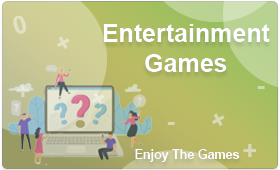
<style>
.page{position:relative;width:280px;height:170px}
.page>*{position:absolute;margin:0}
.t1{font:25px "Arial-BoldMT";color:#e3e1c6}
.t2{font:25px "Arial-BoldMT";color:#ffffff}
.t3{font:25px "Arial-BoldMT";color:#e4e3c6}
.t4{font:25px "Arial-BoldMT";color:#e1e2d2}
.t5{font:25px "Arial-BoldMT";color:#ccdab2}
.t6{font:25px "Arial-BoldMT";color:#edecdb}
.t7{font:25px "Arial-BoldMT";color:#d7dab3}
.t8{font:25px "Arial-BoldMT";color:#d8d7b4}
.t9{font:12.5px "Arial-BoldMT";color:#ffffff}
.t10{font:25px "Arial-BoldMT";color:#d8d9b4}
</style>
<div class="page">
<p class="t1" style="left:13px;top:15px;width:13px;height:19px;rotate:-16deg">0</p>
<p class="t2" style="left:103px;top:24px;width:167px;height:48px;text-align:center">Entertainment<br>Games</p>
<p class="t3" style="left:57px;top:36px;width:13px;height:13px;rotate:-29deg">+</p>
<p class="t4" style="left:16px;top:84px;width:13px;height:13px">+</p>
<p class="t5" style="left:257px;top:86px;width:8px;height:3px">-</p>
<p class="t6" style="left:92px;top:92px;width:13px;height:13px;rotate:-29deg">+</p>
<p class="t7" style="left:212px;top:113px;width:13px;height:13px;rotate:-29deg">+</p>
<p class="t8" style="left:167px;top:122px;width:8px;height:3px">-</p>
<p class="t9" style="left:135px;top:149px;width:105px;height:13px">Enjoy The Games</p>
<p class="t10" style="left:243px;top:144px;width:13px;height:13px">+</p>
</div>
